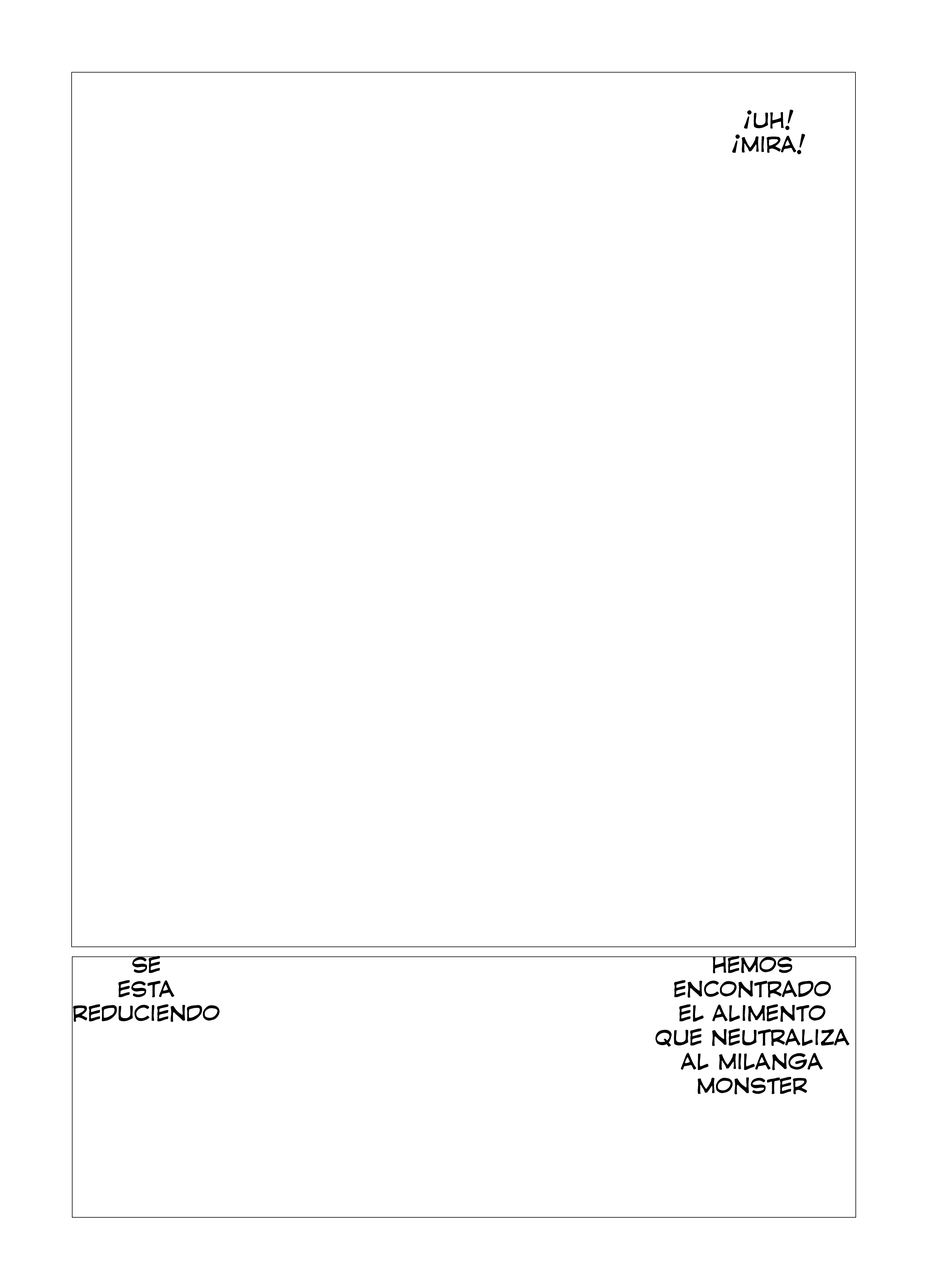
<style>
.page{position:relative;width:928px;height:1285px;background:#ffffff}
.page>*{position:absolute;margin:0}
.t1{font:20.1px "CCComicrazy-Roman";color:#000000}
</style>
<div class="page">
<p class="t1" style="left:732px;top:110px;width:73px;height:44px;text-align:center">¡UH! <br>¡MIRA!</p>
<p class="t1" style="left:73px;top:956px;width:147px;height:66px;text-align:center">SE <br>ESTA <br>REDUCIENDO</p>
<p class="t1" style="left:655px;top:956px;width:194px;height:138px;text-align:center">HEMOS <br>ENCONTRADO <br>EL ALIMENTO <br>QUE NEUTRALIZA <br>AL MILANGA <br>MONSTER</p>
</div>
